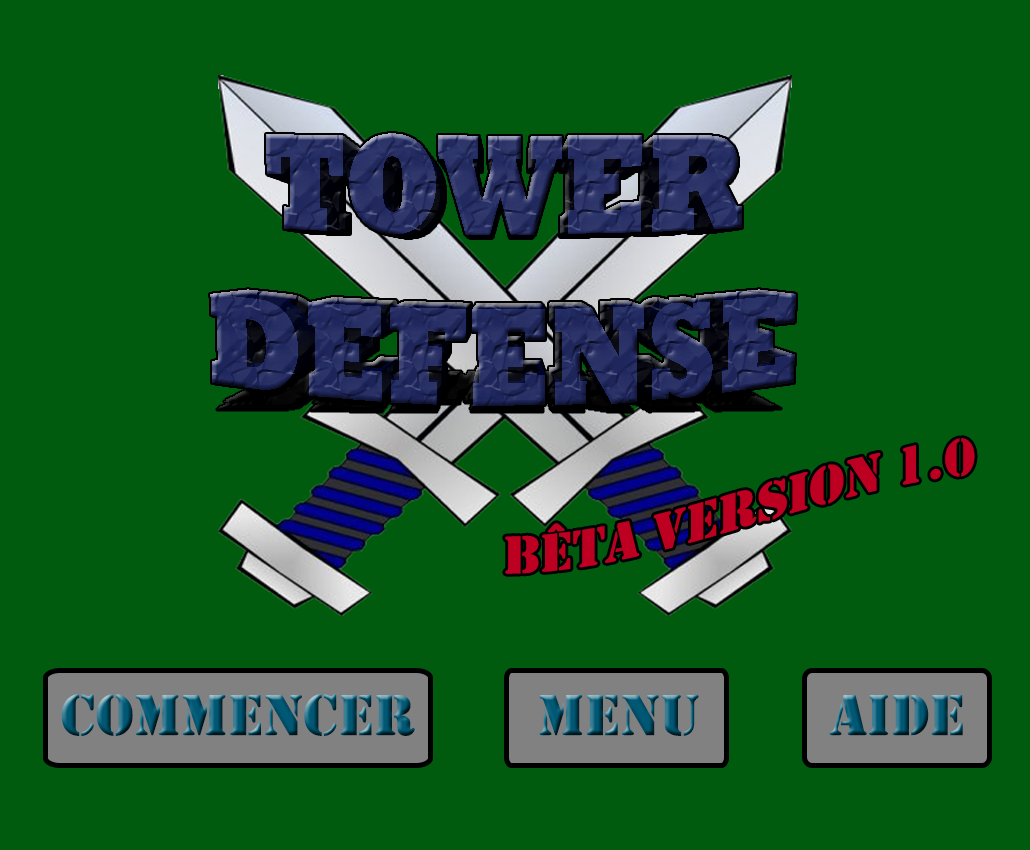
<style>
.page{position:relative;width:1030px;height:850px;background:#005b0e}
.page>*{position:absolute;margin:0}
.t1{font:55px "Stencil";color:#bd0022}
.t2{font:60px "Stencil"}
</style>
<div class="page">
<p class="t1" style="left:505px;top:438px;width:470px;height:136px;text-align:center">bêta version 1.0</p>
<p class="t2" style="left:61px;top:694px;width:354px;height:42px">COMMENCER</p>
<p class="t2" style="left:539px;top:695px;width:160px;height:41px">MENU</p>
<p class="t2" style="left:829px;top:695px;width:134px;height:41px">AIDE</p>
</div>
